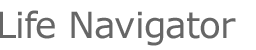
<style>
.page{position:relative;width:256px;height:50px;background:#ffffff}
.page>*{position:absolute;margin:0}
.t1{font:36px "Verdana";letter-spacing:-0.025em;color:#666666}
</style>
<div class="page">
<p class="t1" style="left:0px;top:10px;width:236px;height:36px">Life Navigator</p>
</div>
